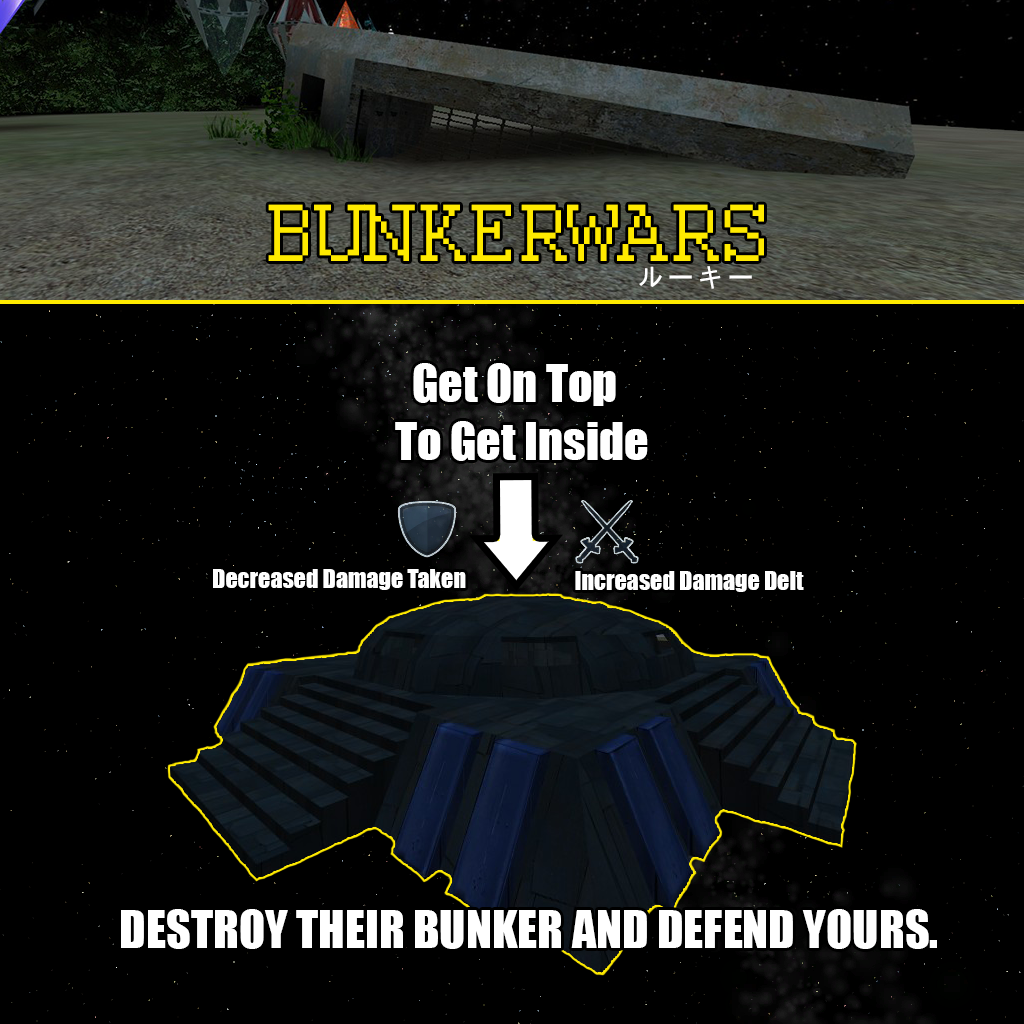
<style>
.page{position:relative;width:1024px;height:1024px;background:#000000}
.page>*{position:absolute;margin:0}
.t1{font:90px "Courier";color:#ffea00}
.t2{font:30px "SimHei";color:#ffffff}
.t3{font:48px "Impact";color:#ffffff}
.t4{font:24px "Impact";color:#ffffff}
</style>
<div class="page">
<p class="t1" style="left:268px;top:204px;width:496px;height:57px">BUNKERWARS</p>
<p class="t2" style="left:639px;top:266px;width:113px;height:23px">ルーキー</p>
<p class="t3" style="left:395px;top:363px;width:253px;height:98px">Get On Top <br>To Get Inside</p>
<p class="t4" style="left:213px;top:569px;width:253px;height:21px">Decreased Damage Taken</p>
<p class="t4" style="left:575px;top:571px;width:229px;height:21px">Increased Damage Delt</p>
<p class="t3" style="left:121px;top:909px;width:816px;height:40px">DESTROY THEIR BUNKER AND DEFEND YOURS.</p>
</div>
